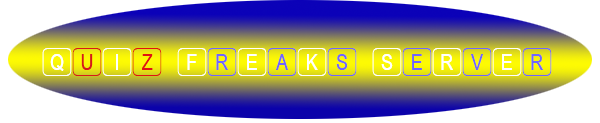
<style>
.page{position:relative;width:600px;height:123px;background:#ffffff}
.page>*{position:absolute;margin:0}
.t1{font:30px "SWGamekeysMT";color:#ffffff}
.t2{font:30px "SWGamekeysMT";color:#d71919}
.t3{font:30px "SWGamekeysMT";color:#e01212}
.t4{font:30px "SWGamekeysMT";color:#7065ff}
</style>
<div class="page">
<p class="t1" style="left:42px;top:48px;width:510px;height:28px">Q<span class="t2">U</span>I<span class="t3">Z </span>F<span class="t4">R</span>E<span class="t4">A</span>K<span class="t4">S </span>S<span class="t4">E</span>R<span class="t4">V</span>E<span class="t4">R</span></p>
</div>
